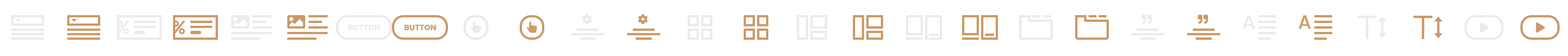
<style>
.page{position:relative;width:1568px;height:56px;background:#ffffff}
.page>*{position:absolute;margin:0}
.t1{font:19px "Poppins-Medium";color:#ebebeb}
.t2{font:19px "Poppins-Medium";color:#cc9966}
.t3{font:7.8px "Poppins-Bold";color:#ebebeb;text-transform:uppercase}
.t4{font:7.8px "Poppins-Bold";color:#cc9966;text-transform:uppercase}
</style>
<div class="page">
<p class="t1" style="left:1243px;top:15px;width:12px;height:14px">A</p>
<p class="t2" style="left:1299px;top:15px;width:12px;height:14px">A</p>
<p class="t3" style="left:348px;top:25px;width:32px;height:5px">Button</p>
<p class="t4" style="left:404px;top:25px;width:32px;height:5px">Button</p>
</div>
